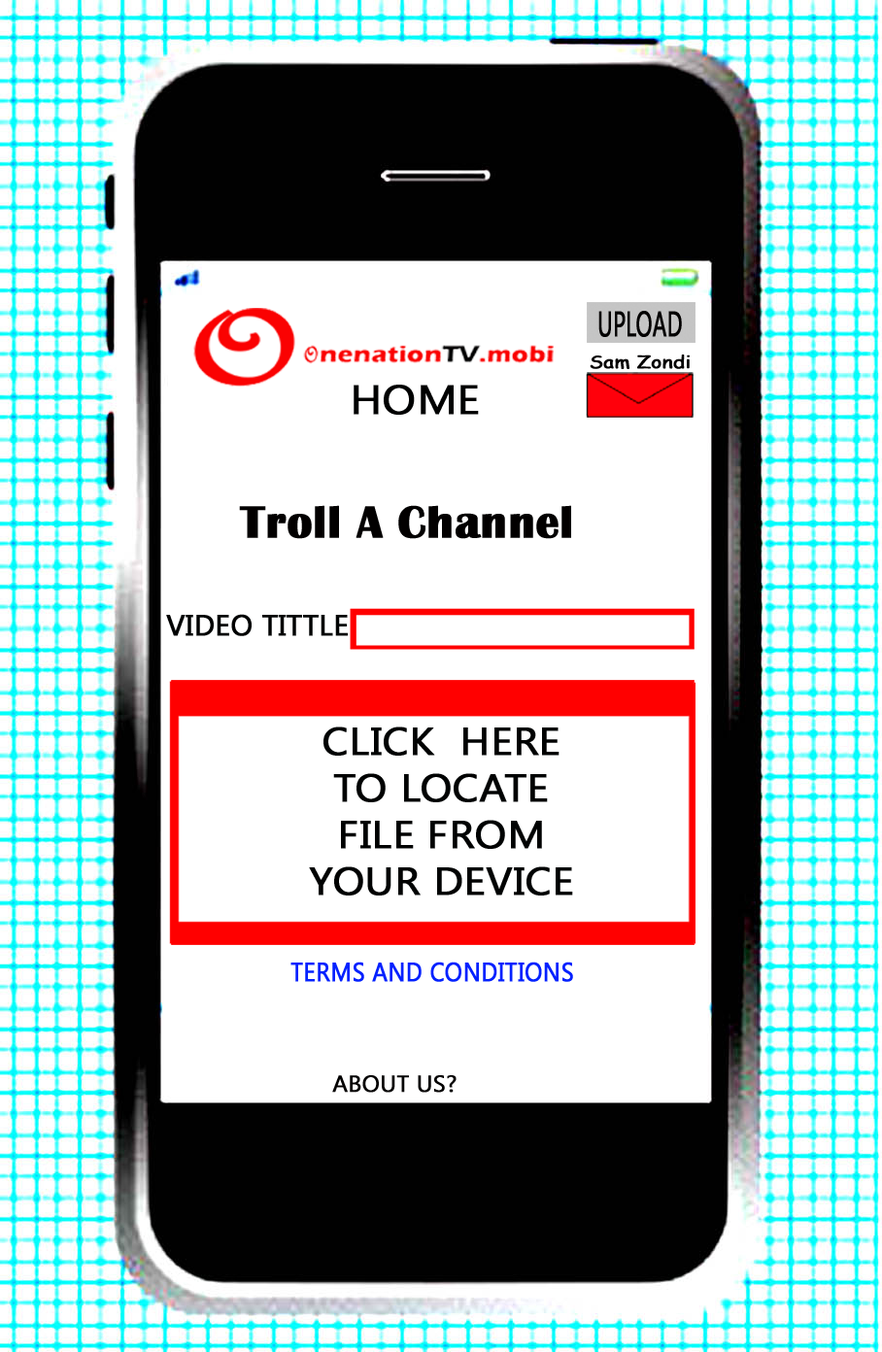
<style>
.page{position:relative;width:882px;height:1352px;background:#ffffff}
.page>*{position:absolute;margin:0}
.t1{font:35.5px "KhmerUI";color:#020000;font-weight:bold;scale:0.61 1}
.t2{font:17.6px "ComicSansMS";color:#020000;font-weight:bold;scale:1.13 1}
.t3{font:41px "KhmerUI";color:#000101;font-weight:bold;scale:1.07 1}
.t4{font:46.4px "BritannicBold";color:#020000;font-weight:bold}
.t5{font:29px "KhmerUI";color:#000202;font-weight:bold}
.t6{font:38.9px "KhmerUI";color:#000202;font-weight:bold;scale:1.07 1}
.t7{font:26.3px "KhmerUI";color:#0321ff;font-weight:bold;scale:0.89 1}
.t8{font:23.2px "KhmerUI";color:#020000;font-weight:bold}
</style>
<div class="page">
<p class="t1" style="left:598px;top:311px;width:84px;height:26px">UPLOAD</p>
<p class="t2" style="left:590px;top:355px;width:100px;height:14px">Sam Zondi</p>
<p class="t3" style="left:354px;top:385px;width:125px;height:30px">HOME</p>
<p class="t4" style="left:239px;top:505px;width:332px;height:34px">Troll A Channel</p>
<p class="t5" style="left:166px;top:614px;width:182px;height:22px">VIDEO TITTLE</p>
<p class="t6" style="left:309px;top:727px;width:264px;height:169px;text-align:center">CLICK  HERE <br>TO LOCATE <br>FILE FROM <br>YOUR DEVICE</p>
<p class="t7" style="left:290px;top:962px;width:283px;height:20px">TERMS AND CONDITIONS</p>
<p class="t8" style="left:332px;top:1075px;width:125px;height:18px">ABOUT US?</p>
</div>
